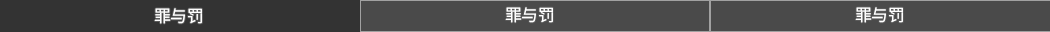
<style>
.page{position:relative;width:1050px;height:32px;background:#4a4a4a}
.page>*{position:absolute;margin:0}
.t1{font:16.7px "SourceHanSansSC-Normal";color:#ffffff}
</style>
<div class="page">
<p class="t1" style="left:154px;top:8px;width:48px;height:16px">罪与罚</p>
<p class="t1" style="left:505px;top:7px;width:48px;height:16px">罪与罚</p>
<p class="t1" style="left:855px;top:7px;width:48px;height:16px">罪与罚</p>
</div>
